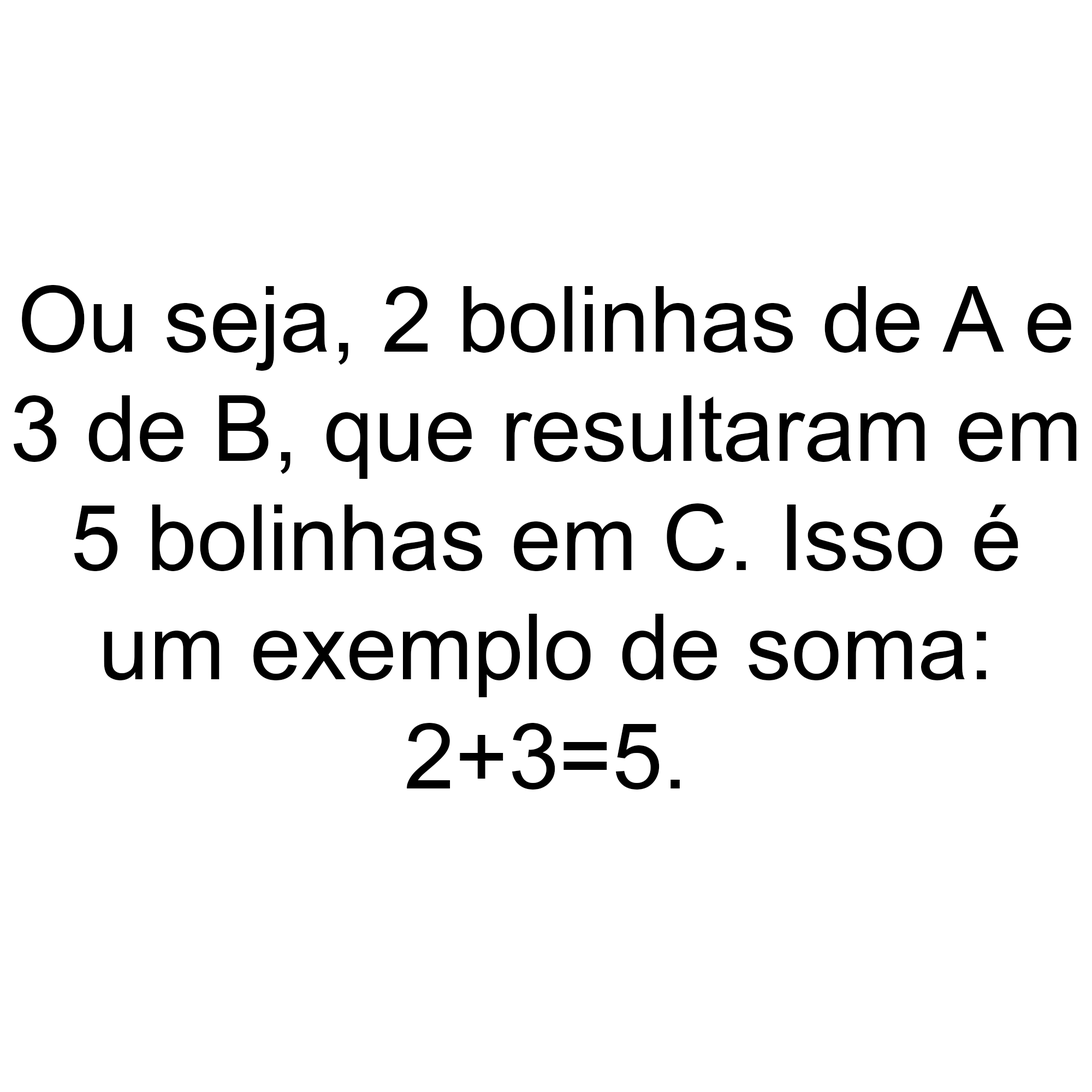
<style>
.page{position:relative;width:1092px;height:1092px;background:#ffffff}
.page>*{position:absolute;margin:0}
.t1{font:91px "ArialMT";color:#000000}
</style>
<div class="page">
<p class="t1" style="left:14px;top:285px;width:1063px;height:505px;text-align:center">Ou seja, 2 bolinhas de A e<br>3 de B, que resultaram em<br>5 bolinhas em C. Isso é<br>um exemplo de soma:<br>2+3=5.</p>
</div>
